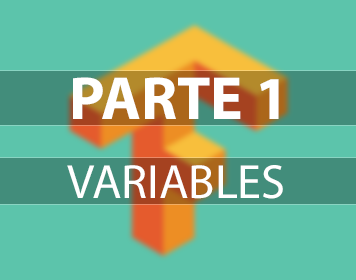
<style>
.page{position:relative;width:356px;height:280px;background:#5cc4ab}
.page>*{position:absolute;margin:0}
.t1{font:61.1px "MyriadPro-Bold";color:#ffffff}
.t2{font:48.3px "MyriadPro-Regular";color:#ffffff}
</style>
<div class="page">
<p class="t1" style="left:73px;top:77px;width:206px;height:42px">PARTE 1</p>
<p class="t2" style="left:67px;top:165px;width:216px;height:34px">VARIABLES</p>
</div>
